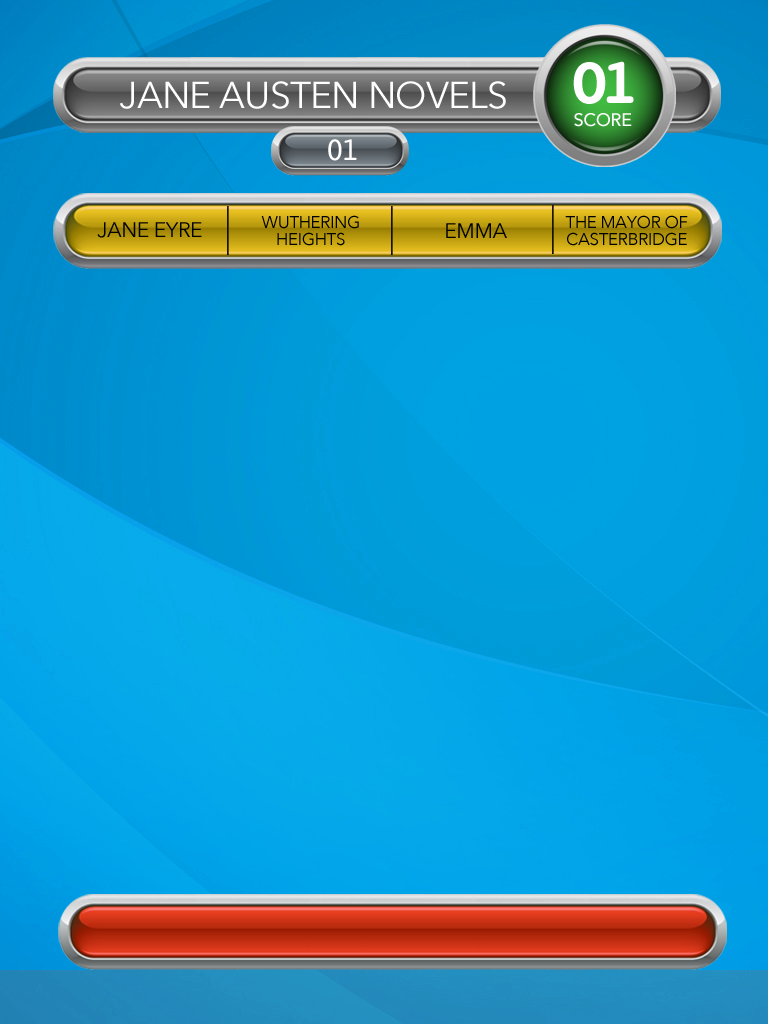
<style>
.page{position:relative;width:768px;height:1024px}
.page>*{position:absolute;margin:0}
.t1{font:65px "Courier-Bold";letter-spacing:-0.14em;color:#ffffff}
.t2{font:37px "AvenirNext-Regular";letter-spacing:-0.02em;color:#ffffff}
.t3{font:18px "AvenirNext-Medium";letter-spacing:-0.02em;color:#ffffff}
.t4{font:33px "Courier";letter-spacing:-0.14em;color:#ffffff}
.t5{font:21px "AvenirNext-Regular";letter-spacing:-0.02em;color:#000000}
.t6{font:17px/17px "AvenirNext-Regular";letter-spacing:-0.02em;color:#000000}
</style>
<div class="page">
<p class="t1" style="left:573px;top:61px;width:61px;height:43px">01</p>
<p class="t2" style="left:120px;top:81px;width:386px;height:28px">JANE AUSTEN NOVELS</p>
<p class="t3" style="left:574px;top:113px;width:58px;height:14px">SCORE</p>
<p class="t4" style="left:328px;top:139px;width:29px;height:22px">01</p>
<p class="t5" style="left:97px;top:222px;width:105px;height:16px">JANE EYRE</p>
<p class="t6" style="left:261px;top:215px;width:98px;height:31px;text-align:center">WUTHERING<br>HEIGHTS</p>
<p class="t6" style="left:565px;top:215px;width:123px;height:31px;text-align:center">THE MAYOR OF<br>CASTERBRIDGE</p>
<p class="t5" style="left:446px;top:223px;width:61px;height:15px">EMMA</p>
</div>
